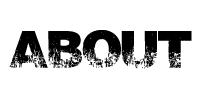
<style>
.page{position:relative;width:200px;height:100px;background:#ffffff}
.page>*{position:absolute;margin:0}
.t1{font:48px "ScorchedEarth";color:#000000}
</style>
<div class="page">
<p class="t1" style="left:9px;top:30px;width:183px;height:39px">about</p>
</div>
